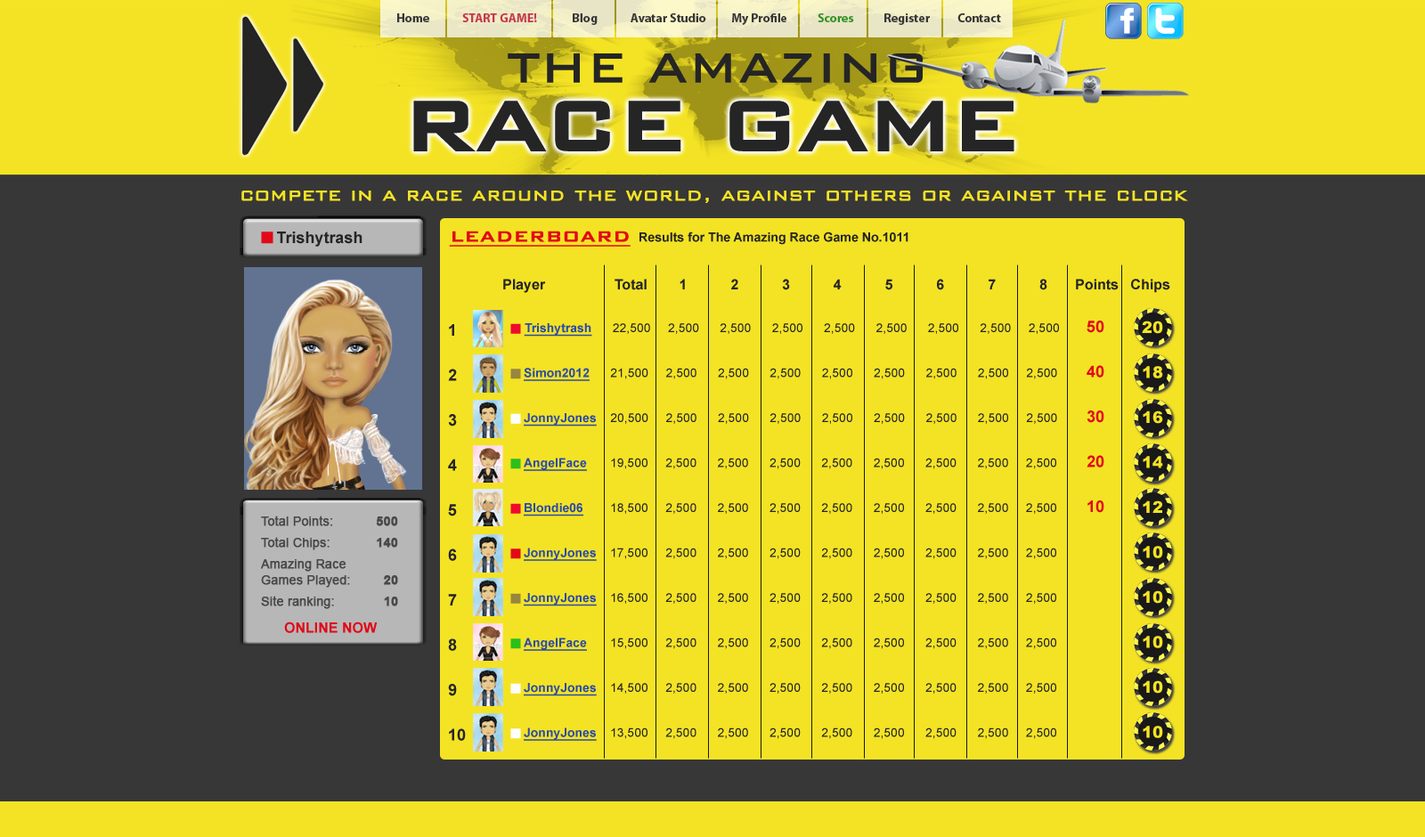
<style>
.page{position:relative;width:1425px;height:837px;background:#f4e324}
.page>*{position:absolute;margin:0}
.t1{font:12.5px "MyriadPro-Bold";color:#373737}
.t2{font:12.5px "MyriadPro-Bold";color:#c6384b}
.t3{font:12.5px "MyriadPro-Bold";color:#369127}
.t4{font:53.7px "BankGothic-Light";color:#252525;font-weight:bold}
.t5{font:93.1px "BankGothic-Medium";letter-spacing:-0.05em;color:#252525;font-weight:bold}
.t6{font:22.4px "BankGothic-Light";color:#f4e324;font-weight:bold}
.t7{font:16px "Arial-BoldMT";color:#252525}
.t8{font:12.5px "ZapfDingbatsITCbyBT-Regular";color:#e10918}
.t9{font:12.6px "Arial-BoldMT";color:#252525}
.t10{font:20.1px "BankGothic-Medium";color:#e10918;font-weight:bold;text-decoration:underline}
.t11{font:14.2px "Arial-BoldMT";color:#252525}
.t12{font:16px/45px "Arial-BoldMT";color:#252525}
.t13{font:12.5px/45px "ArialMT";color:#252525}
.t14{font:10.7px/45px "ZapfDingbatsITCbyBT-Regular";color:#ef0b2b}
.t15{font:12.5px/45px "Arial-BoldMT";color:#2a4ba9;text-decoration:underline}
.t16{font:10.7px/45px "ZapfDingbatsITCbyBT-Regular";color:#98863e}
.t17{font:10.7px/45px "ZapfDingbatsITCbyBT-Regular";color:#ffffff}
.t18{font:10.7px/45px "ZapfDingbatsITCbyBT-Regular";color:#2cbf1c}
.t19{font:10.7px/45px "ZapfDingbatsITCbyBT-Regular";color:#e10918}
.t20{font:16px/45px "Arial-BoldMT";color:#e10918}
.t21{font:16px/45px "Arial-Black";color:#f4e324}
.t22{font:12.5px/21.4px "ArialMT";color:#494949;font-weight:bold}
.t23{font:12.5px/21.4px "Arial-BoldMT";color:#494949;font-weight:bold}
.t24{font:12.5px/16px "ArialMT";color:#494949;font-weight:bold}
.t25{font:12.5px/16px "Arial-BoldMT";color:#494949;font-weight:bold}
.t26{font:14.2px "Arial-BoldMT";color:#e10918}
</style>
<div class="page">
<p class="t1" style="left:397px;top:13px;width:604px;height:12px">Home             <span class="t2">START GAME!</span>              Blog             Avatar Studio          My Profile            <span class="t3">Scores</span>            Register           Contact</p>
<p class="t4" style="left:508px;top:53px;width:414px;height:30px">THE AMAZING</p>
<p class="t5" style="left:413px;top:101px;width:601px;height:50px">RACE GAME</p>
<p class="t6" style="left:241px;top:191px;width:947px;height:12px">compete in a race around the world, against others or against the clock</p>
<p class="t7" style="left:261px;top:232px;width:101px;height:15px"><span class="t8">n </span>Trishytrash</p>
<p class="t9" style="left:449px;top:231px;width:459px;height:16px"><span class="t10">LEADERBOARD </span>Results for The Amazing Race Game No.1011</p>
<p class="t11" style="left:503px;top:279px;width:667px;height:14px">Player      Total        1           2           3           4           5           6           7           8        Points   Chips</p>
<p class="t12" style="left:448px;top:324px;width:18px;height:417px">1<br>2<br>3<br>4<br>5<br>6<br>7<br>8<br>9<br>10</p>
<p class="t13" style="left:510px;top:323px;width:549px;height:418px"><span class="t14">n </span><span class="t15">Trishytrash      </span>22,500     2,500      2,500      2,500      2,500      2,500      2,500      2,500     2,500<br><span class="t16">n </span><span class="t15">Simon2012      </span>21,500     2,500      2,500      2,500      2,500      2,500      2,500      2,500     2,500<br><span class="t17">n </span><span class="t15">JonnyJones    </span>20,500     2,500      2,500      2,500      2,500      2,500      2,500      2,500     2,500<br><span class="t18">n </span><span class="t15">AngelFace  </span>19,500     2,500      2,500      2,500      2,500      2,500      2,500      2,500     2,500<br><span class="t14">n </span><span class="t15">Blondie06  </span>18,500     2,500      2,500      2,500      2,500      2,500      2,500      2,500     2,500<br><span class="t19">n </span><span class="t15">JonnyJones  </span>17,500     2,500      2,500      2,500      2,500      2,500      2,500      2,500     2,500<br><span class="t16">n </span><span class="t15">JonnyJones  </span>16,500     2,500      2,500      2,500      2,500      2,500      2,500      2,500     2,500<br><span class="t18">n </span><span class="t15">AngelFace  </span>15,500     2,500      2,500      2,500      2,500      2,500      2,500      2,500     2,500<br><span class="t17">n </span><span class="t15">JonnyJones  </span>14,500     2,500      2,500      2,500      2,500      2,500      2,500      2,500     2,500<br><span class="t17">n </span><span class="t15">JonnyJones  </span>13,500     2,500      2,500      2,500      2,500      2,500      2,500      2,500     2,500</p>
<p class="t20" style="left:1086px;top:321px;width:18px;height:192px">50<br>40<br>30<br>20<br>10</p>
<p class="t21" style="left:1142px;top:321px;width:21px;height:417px">20<br>18<br>16<br>14<br>12<br>10<br>10<br>10<br>10<br>10</p>
<p class="t22" style="left:261px;top:516px;width:137px;height:93px">Total Points:      <span class="t23">500<br></span>Total Chips:      <span class="t23">140<br></span>Amazing Race<br><span class="t24">Games Played:        </span><span class="t25">20<br></span>Site ranking:        <span class="t23">10</span></p>
<p class="t26" style="left:284px;top:622px;width:94px;height:11px">ONLINE NOW</p>
</div>
